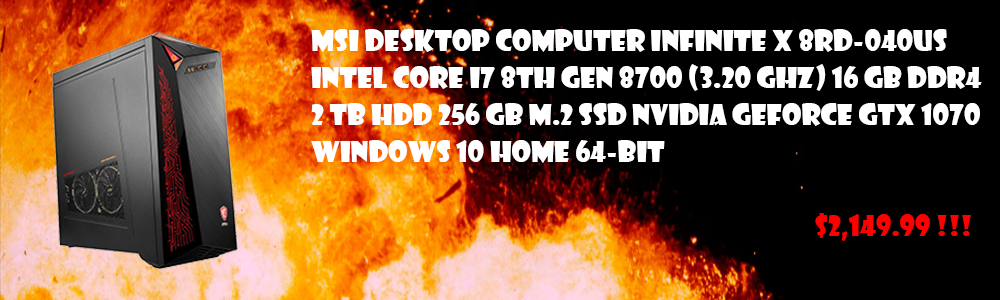
<style>
.page{position:relative;width:1000px;height:300px;background:#000000}
.page>*{position:absolute;margin:0}
.t1{font:28px/37px "ShowcardGothic-Reg";color:#ffffff}
.t2{font:28px/37px "ShowcardGothic-Reg";color:#ff0000}
</style>
<div class="page">
<p class="t1" style="left:311px;top:29px;width:671px;height:212px">MSI Desktop Computer Infinite X 8RD-040US <br>Intel Core i7 8th Gen 8700 (3.20 GHz) 16 GB DDR4 2 TB HDD 256 GB M.2 SSD NVIDIA GeForce GTX 1070 Windows 10 Home 64-Bit<br><br>              <span class="t2">$2,149.99 !!!</span></p>
</div>
